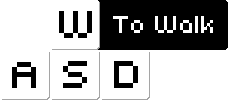
<style>
.page{position:relative;width:228px;height:100px;background:#ffffff}
.page>*{position:absolute;margin:0}
.t1{font:42.5px "Uni0553";color:#000000;scale:0.88 1}
.t2{font:27px "Uni0553";color:#ffffff;scale:0.88 1}
</style>
<div class="page">
<p class="t1" style="left:59px;top:11px;width:33px;height:27px">W</p>
<p class="t2" style="left:113px;top:16px;width:100px;height:17px">To Walk</p>
<p class="t1" style="left:12px;top:62px;width:24px;height:26px">A</p>
<p class="t1" style="left:63px;top:61px;width:24px;height:27px">S</p>
<p class="t1" style="left:114px;top:61px;width:24px;height:27px">D</p>
</div>
